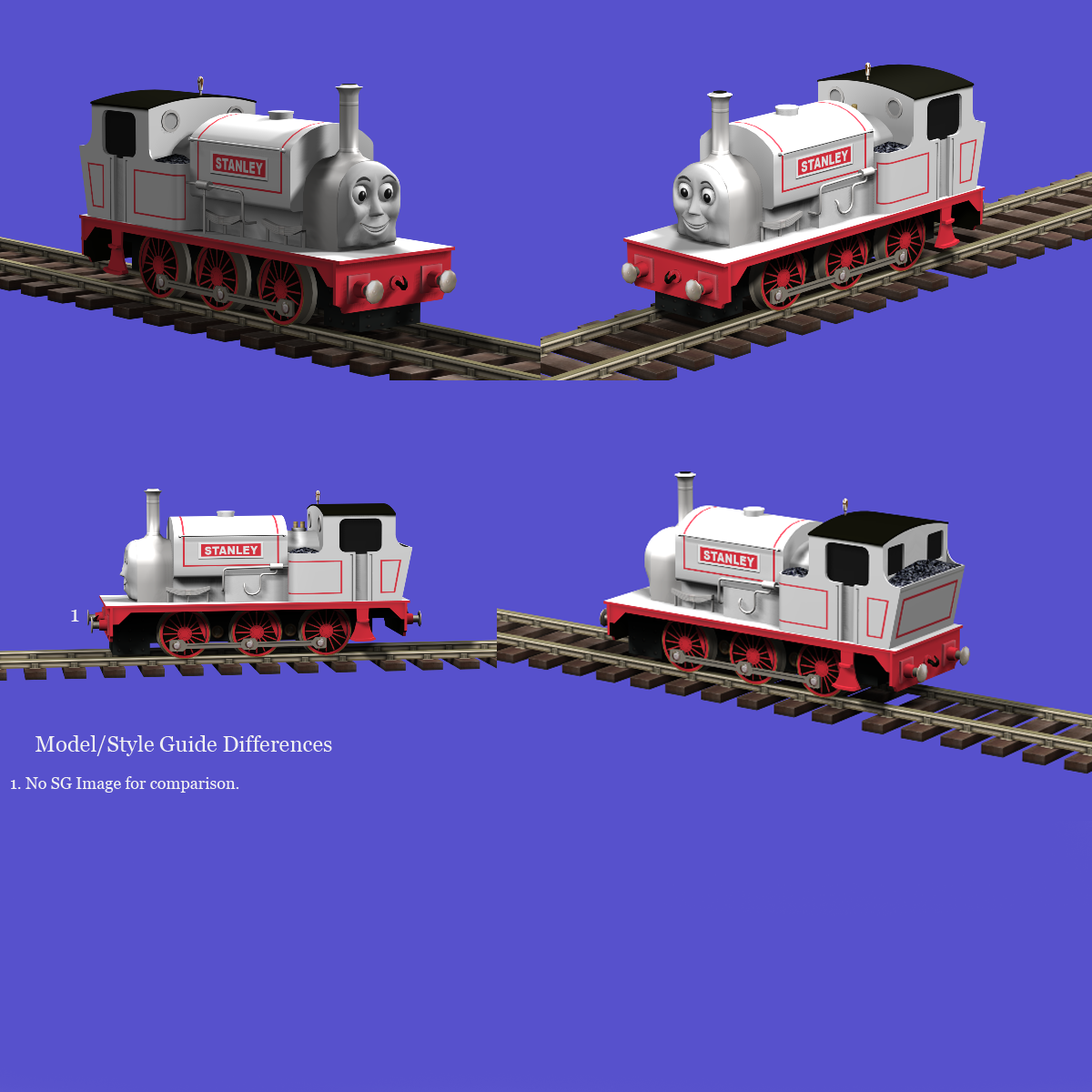
<style>
.page{position:relative;width:1092px;height:1092px;background:#5751cc}
.page>*{position:absolute;margin:0}
.t1{font:21.8px "Georgia";color:#f1f1f1}
.t2{font:16.4px "Georgia";color:#f1f1f1}
</style>
<div class="page">
<p class="t1" style="left:71px;top:610px;width:8px;height:12px">1</p>
<p class="t1" style="left:35px;top:735px;width:297px;height:21px">Model/Style Guide Differences</p>
<p class="t2" style="left:11px;top:776px;width:228px;height:17px">1. No SG Image for comparison.</p>
</div>
